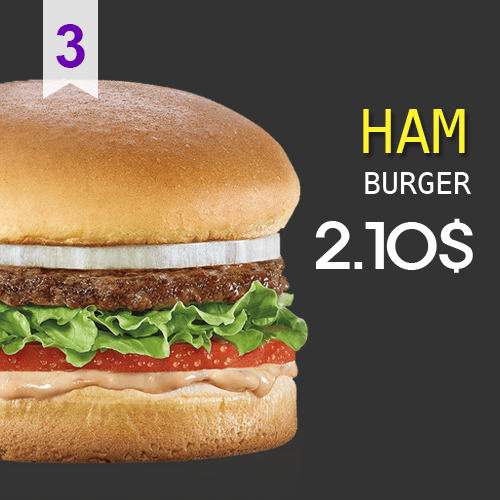
<style>
.page{position:relative;width:500px;height:500px;background:#333333}
.page>*{position:absolute;margin:0}
.t1{font:60px "Arial-BoldMT";color:#6b02b2}
.t2{font:60px "DejaVuSansMono";color:#fff32b}
.t3{font:30px "DejaVuSansMono";color:#ffffff}
.t4{font:60px "ExpoM-HM";color:#ffffff}
</style>
<div class="page">
<p class="t1" style="left:56px;top:24px;width:29px;height:44px">3</p>
<p class="t2" style="left:363px;top:109px;width:102px;height:44px">HAM</p>
<p class="t3" style="left:365px;top:172px;width:106px;height:22px">BURGER</p>
<p class="t4" style="left:316px;top:218px;width:157px;height:55px">2.10$</p>
</div>
